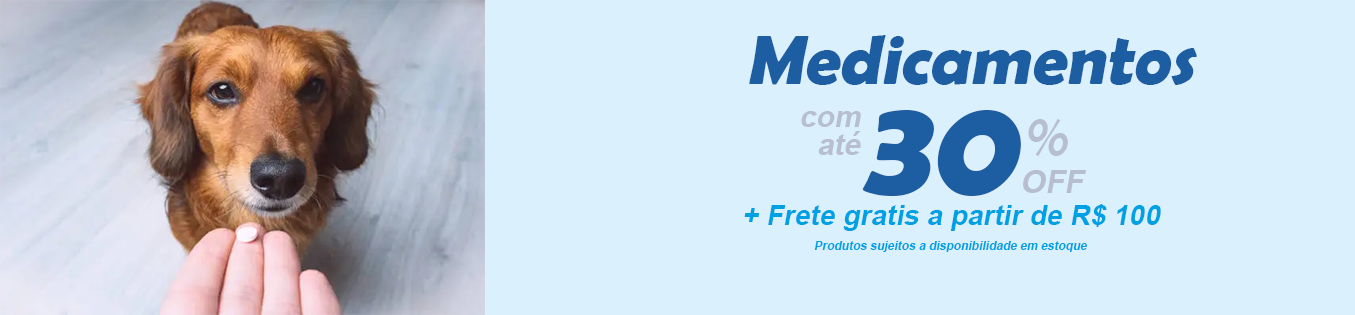
<style>
.page{position:relative;width:1355px;height:315px;background:#daf0fd}
.page>*{position:absolute;margin:0}
.t1{font:70px "BerlinSansFBDemi-Bold";color:#1d5da2;font-style:italic}
.t2{font:30px "Arial-BoldMT";color:#b7bece;font-style:italic}
.t3{font:140px "BerlinSansFBDemi-Bold";color:#1d5da2;font-style:italic}
.t4{font:60px "BerlinSansFB-Reg";color:#b7bece;font-style:italic}
.t5{font:32px "Arial-BoldMT";color:#b7bece;font-style:italic}
.t6{font:28px "Arial-BoldMT";color:#00a1e4;font-style:italic}
.t7{font:12px "Arial-BoldMT";color:#00a1e4;font-style:italic}
</style>
<div class="page">
<p class="t1" style="left:749px;top:35px;width:448px;height:50px">Medicamentos</p>
<p class="t2" style="left:801px;top:111px;width:60px;height:16px">com</p>
<p class="t3" style="left:862px;top:110px;width:159px;height:86px">30</p>
<p class="t4" style="left:1028px;top:119px;width:40px;height:37px">%</p>
<p class="t2" style="left:818px;top:131px;width:43px;height:24px">até</p>
<p class="t5" style="left:1023px;top:170px;width:63px;height:23px">OFF</p>
<p class="t6" style="left:744px;top:204px;width:417px;height:27px">+ Frete gratis a partir de R$ 100</p>
<p class="t7" style="left:814px;top:241px;width:273px;height:11px">Produtos sujeitos a disponibilidade em estoque</p>
</div>
